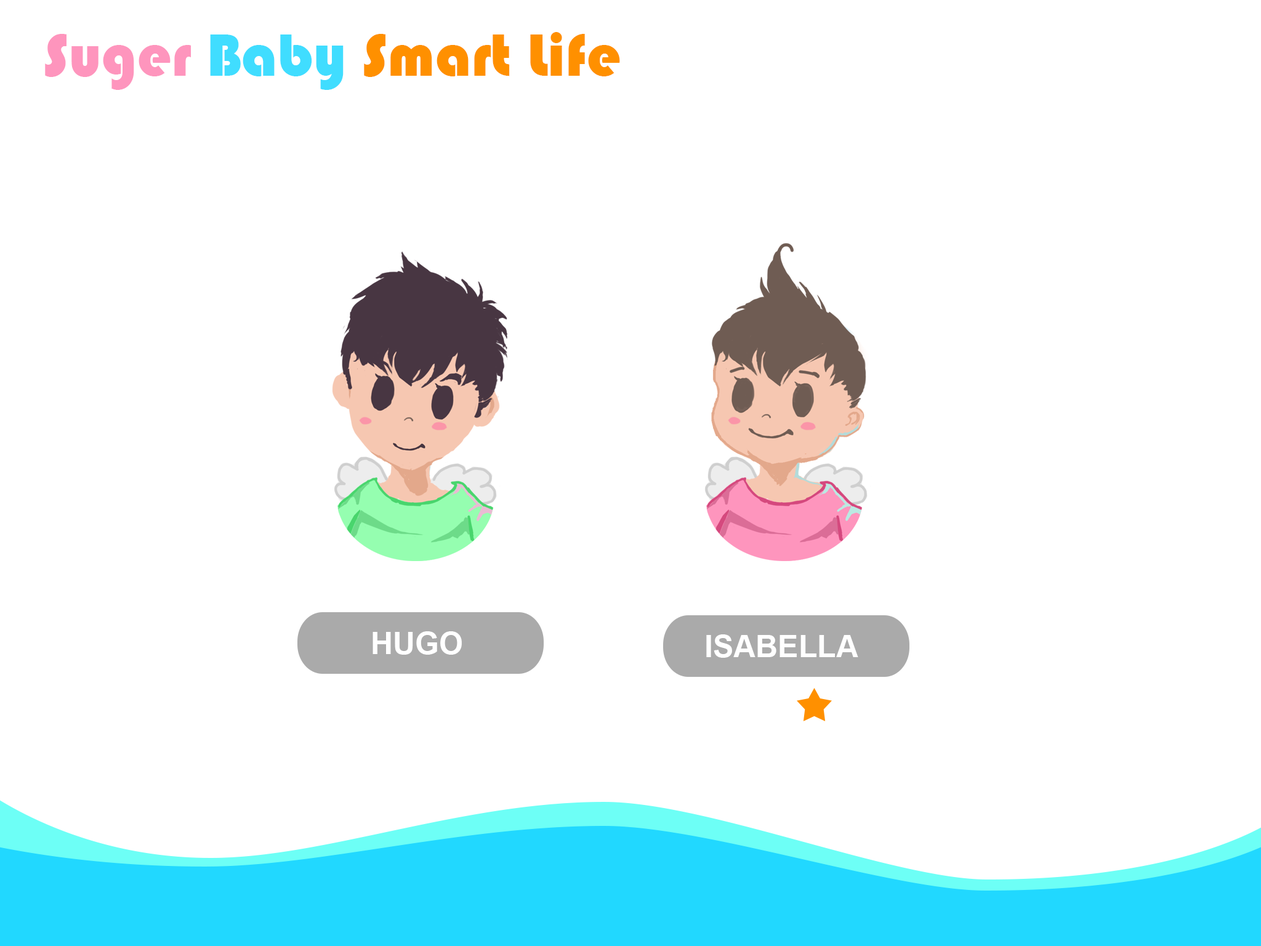
<style>
.page{position:relative;width:1261px;height:946px;background:#ffffff}
.page>*{position:absolute;margin:0}
.t1{font:61.6px "Bauhaus93";color:#ff9000}
.t2{font:61.6px "Bauhaus93";color:#fe95bd}
.t3{font:61.6px "Bauhaus93";color:#40ddff}
.t4{font:30.8px "Arial-BoldMT";color:#ffffff}
</style>
<div class="page">
<p class="t1" style="left:45px;top:32px;width:575px;height:58px"><span class="t2">Suger </span><span class="t3">Baby </span>Smart Life</p>
<p class="t4" style="left:372px;top:631px;width:90px;height:23px">HUGO</p>
<p class="t4" style="left:706px;top:634px;width:152px;height:24px">ISABELLA</p>
</div>
